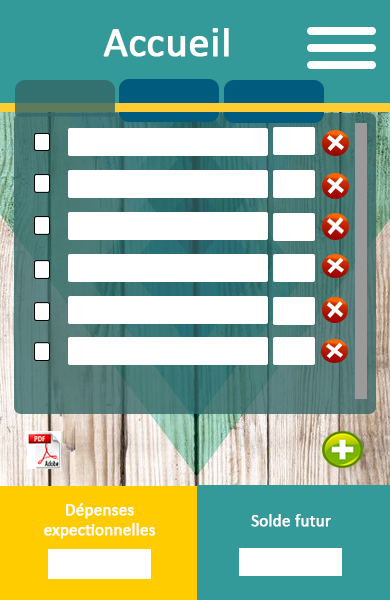
<style>
.page{position:relative;width:390px;height:600px;background:#ffffff}
.page>*{position:absolute;margin:0}
.t1{font:41.7px "Calibri";color:#ffffff;font-weight:bold}
.t2{font:16.7px "Calibri";color:#ffffff;font-weight:bold}
</style>
<div class="page">
<p class="t1" style="left:103px;top:28px;width:126px;height:29px">Accueil</p>
<p class="t2" style="left:44px;top:503px;width:111px;height:36px;text-align:center">Dépenses <br>expectionnelles</p>
<p class="t2" style="left:251px;top:514px;width:80px;height:13px">Solde futur</p>
</div>
